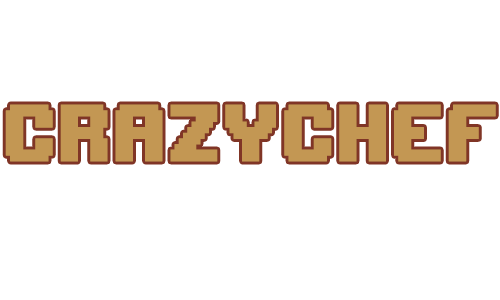
<style>
.page{position:relative;width:500px;height:300px;background:#ffffff}
.page>*{position:absolute;margin:0}
.t1{font:112.2px "UpheavalTT-BRK-";letter-spacing:0.025em;color:#c39753;font-weight:bold;scale:0.75 1}
</style>
<div class="page">
<p class="t1" style="left:5px;top:104px;width:491px;height:58px">Crazychef</p>
</div>
